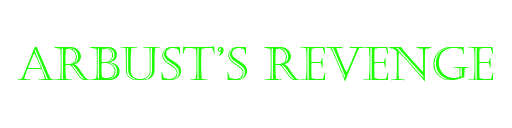
<style>
.page{position:relative;width:512px;height:128px;background:#ffffff}
.page>*{position:absolute;margin:0}
.t1{font:45.8px "Castellar";color:#1eff00}
</style>
<div class="page">
<p class="t1" style="left:17px;top:46px;width:477px;height:35px">ARBUST’S REVENGE</p>
</div>
